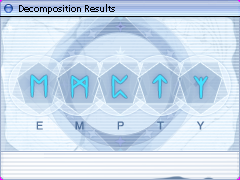
<style>
.page{position:relative;width:240px;height:180px}
.page>*{position:absolute;margin:0}
.t1{font:10px "MyriadPro-Regular";color:#000000}
</style>
<div class="page">
<p class="t1" style="left:19px;top:4px;width:96px;height:10px">Decomposition Results</p>
</div>
